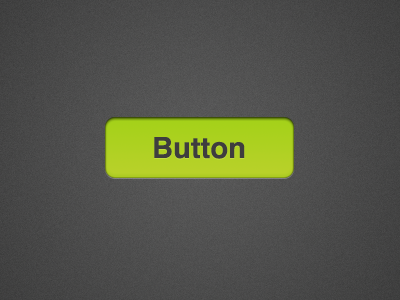
<style>
.page{position:relative;width:400px;height:300px}
.page>*{position:absolute;margin:0}
.t1{font:29.2px "Helvetica-Bold";color:#3e3d3e}
</style>
<div class="page">
<p class="t1" style="left:154px;top:137px;width:91px;height:22px">Button</p>
</div>
